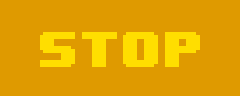
<style>
.page{position:relative;width:240px;height:96px;background:#df9a00}
.page>*{position:absolute;margin:0}
.t1{font:41.6px "8BITWONDERNominal";color:#ffde00}
</style>
<div class="page">
<p class="t1" style="left:40px;top:32px;width:160px;height:35px">stop</p>
</div>
